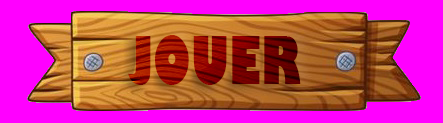
<style>
.page{position:relative;width:443px;height:123px;background:#ff00ff}
.page>*{position:absolute;margin:0}
.t1{font:65px "GillSans-UltraBoldCondensed"}
</style>
<div class="page">
<p class="t1" style="left:128px;top:35px;width:173px;height:50px">JOUER</p>
</div>
